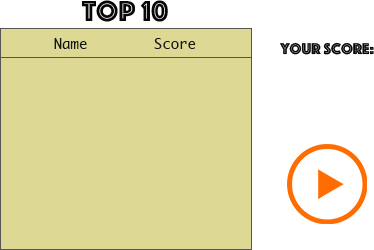
<style>
.page{position:relative;width:374px;height:250px;background:#ded895}
.page>*{position:absolute;margin:0}
.t1{font:30px "Phosphate-Inline";color:#070707}
.t2{font:14px "Ayuthaya";color:#151515}
.t3{font:16px "Phosphate-Inline";color:#070707}
</style>
<div class="page">
<p class="t1" style="left:82px;top:0px;width:86px;height:22px">Top 10</p>
<p class="t2" style="left:54px;top:38px;width:142px;height:11px">Name        Score</p>
<p class="t3" style="left:280px;top:42px;width:94px;height:13px">Your score:</p>
</div>
